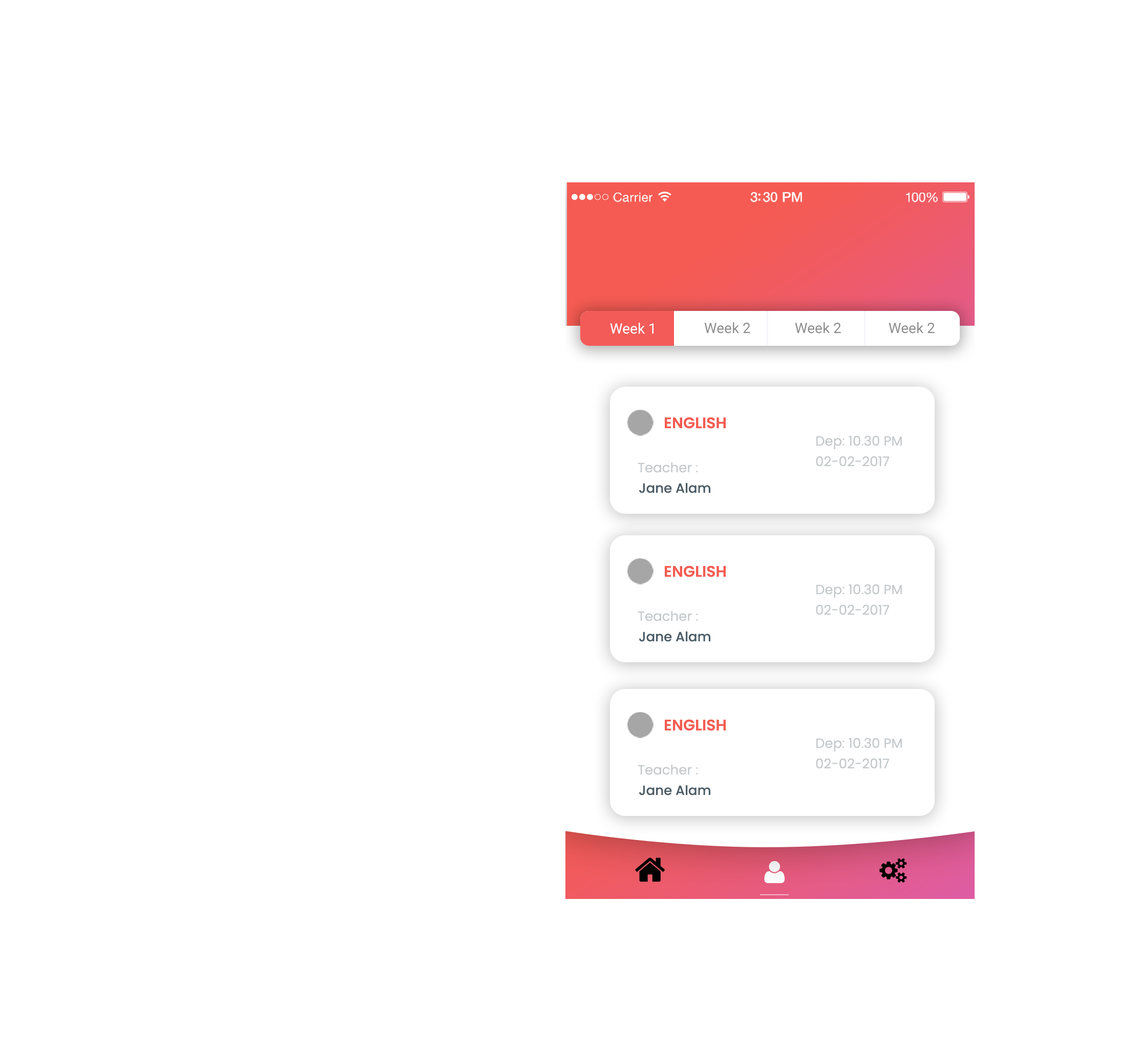
<style>
.page{position:relative;width:1138px;height:1048px;background:#ffffff}
.page>*{position:absolute;margin:0}
.t1{font:12.6px "HelveticaNeue";letter-spacing:0.02em;color:#ffffff}
.t2{font:13.7px "HelveticaNeue-Medium";letter-spacing:-0.02em;color:#ffffff}
.t3{font:13.2px "HelveticaNeue";letter-spacing:-0.02em;color:#ffffff}
.t4{font:14.3px "Roboto-Regular";color:#ffffff}
.t5{font:14.3px "Roboto-Regular";color:#8d8d8d}
.t6{font:15.4px "Poppins-SemiBold";color:#f55b52}
.t7{font:13.3px/20.5px "Poppins-Regular";color:#c4c8cb}
.t8{font:13.3px "Poppins-Regular";color:#c4c8cb}
.t9{font:13.3px "Poppins-Medium";color:#4b5c66}
</style>
<div class="page">
<p class="t1" style="left:613px;top:193px;width:39px;height:9px">Carrier</p>
<p class="t2" style="left:750px;top:192px;width:52px;height:10px">3:30 PM</p>
<p class="t3" style="left:906px;top:193px;width:32px;height:9px">100%</p>
<p class="t4" style="left:610px;top:323px;width:43px;height:11px">Week 1</p>
<p class="t5" style="left:704px;top:322px;width:46px;height:11px">Week 2</p>
<p class="t5" style="left:795px;top:322px;width:46px;height:11px">Week 2</p>
<p class="t5" style="left:889px;top:322px;width:46px;height:11px">Week 2</p>
<p class="t6" style="left:665px;top:417px;width:61px;height:12px">ENGLISH</p>
<p class="t7" style="left:816px;top:435px;width:86px;height:31px">Dep: 10.30 PM<br>02-02-2017</p>
<p class="t8" style="left:638px;top:462px;width:60px;height:11px">Teacher :</p>
<p class="t9" style="left:639px;top:482px;width:71px;height:11px">Jane Alam</p>
<p class="t6" style="left:665px;top:565px;width:61px;height:12px">ENGLISH</p>
<p class="t7" style="left:816px;top:584px;width:86px;height:31px">Dep: 10.30 PM<br>02-02-2017</p>
<p class="t8" style="left:638px;top:610px;width:60px;height:11px">Teacher :</p>
<p class="t9" style="left:639px;top:631px;width:71px;height:11px">Jane Alam</p>
<p class="t6" style="left:665px;top:719px;width:61px;height:12px">ENGLISH</p>
<p class="t7" style="left:816px;top:737px;width:86px;height:31px">Dep: 10.30 PM<br>02-02-2017</p>
<p class="t8" style="left:638px;top:764px;width:60px;height:11px">Teacher :</p>
<p class="t9" style="left:639px;top:785px;width:71px;height:10px">Jane Alam</p>
</div>
